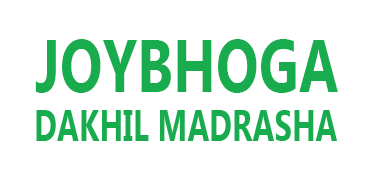
<style>
.page{position:relative;width:374px;height:181px;background:#ffffff}
.page>*{position:absolute;margin:0}
.t1{font:74.1px "LaoUI-Bold";color:#18ac4f;scale:0.76 1}
.t2{font:44px "LaoUI-Bold";color:#18ac4f;scale:0.71 1}
</style>
<div class="page">
<p class="t1" style="left:35px;top:39px;width:303px;height:54px">JOYBHOGA</p>
<p class="t2" style="left:36px;top:110px;width:301px;height:31px">DAKHIL MADRASHA</p>
</div>
